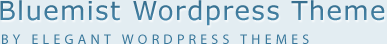
<style>
.page{position:relative;width:387px;height:44px;background:#e3edf2}
.page>*{position:absolute;margin:0}
.t1{font:26px "Verdana";letter-spacing:0.05em;color:#3f7da1}
.t2{font:14px "MyriadPro-Regular";letter-spacing:0.3em;color:#3b799c}
</style>
<div class="page">
<p class="t1" style="left:0px;top:0px;width:385px;height:26px">Bluemist Wordpress Theme</p>
<p class="t2" style="left:2px;top:34px;width:307px;height:10px">BY ELEGANT WORDPRESS THEMES</p>
</div>
